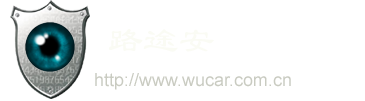
<style>
.page{position:relative;width:365px;height:101px;background:#ffffff}
.page>*{position:absolute;margin:0}
.t1{font:36px "LiSu";color:#fafbf4}
.t2{font:18px "ArialMT";color:#c9cbc1}
</style>
<div class="page">
<p class="t1" style="left:109px;top:29px;width:105px;height:23px">路途安</p>
<p class="t2" style="left:95px;top:73px;width:196px;height:17px">http://www.wucar.com.cn</p>
</div>
